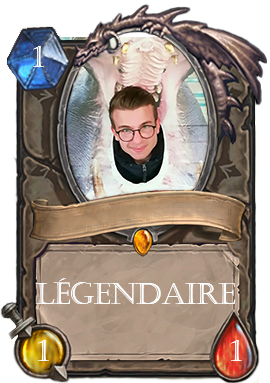
<style>
.page{position:relative;width:270px;height:383px}
.page>*{position:absolute;margin:0}
.t1{font:30px "Castellar";letter-spacing:-0.025em;color:#ffffff}
</style>
<div class="page">
<p class="t1" style="left:33px;top:46px;width:11px;height:21px">1</p>
<p class="t1" style="left:35px;top:278px;width:201px;height:26px">Légendaire</p>
<p class="t1" style="left:38px;top:340px;width:11px;height:21px">1</p>
<p class="t1" style="left:231px;top:340px;width:11px;height:21px">1</p>
</div>
